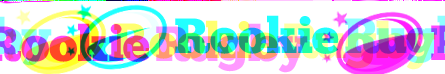
<style>
.page{position:relative;width:445px;height:74px;background:#ffffff}
.page>*{position:absolute;margin:0}
.t1{font:49.5px "ChunkFive-Roman";letter-spacing:-0.03em}
.t2{font:49.5px "ChunkFive-Roman";letter-spacing:-0.01em}
.t3{font:49.5px "ChunkFive-Roman";letter-spacing:-0.022em}
.t4{font:49.5px "ChunkFive-Roman";letter-spacing:-0.08em}
</style>
<div class="page">
<p class="t1" style="left:114px;top:15px;width:322px;height:50px"><span class="t2">Ro</span><span class="t3">oki</span><span class="t4">e </span><span class="t4">R</span>ugby</p>
</div>
